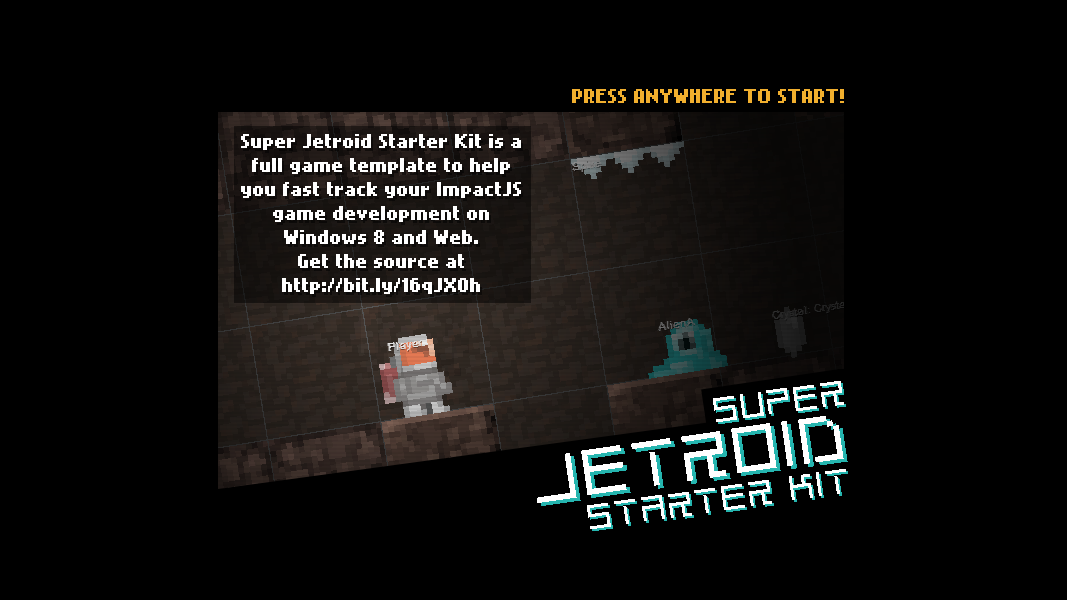
<style>
.page{position:relative;width:1067px;height:600px;background:#000000}
.page>*{position:absolute;margin:0}
.t1{font:16px "NokiaCellphoneFC-Small";color:#f1af2e}
.t2{font:16px/24px "NokiaCellphoneFC-Small";color:#ffffff}
.t3{font:38px "Radio Space Bitmap";color:#ffffff}
.t4{font:32px "NokiaCellphoneFC-Small";color:#ffffff}
.t5{font:72px "Radio Space Bitmap";color:#ffffff}
</style>
<div class="page">
<p class="t1" style="left:572px;top:89px;width:272px;height:14px">PRESS ANYWHERE TO START!</p>
<p class="t2" style="left:241px;top:134px;width:280px;height:160px;text-align:center">Super Jetroid Starter Kit is a full game template to help you fast track your ImpactJS game development on Windows 8 and Web.<br>Get the source at http://bit.ly/16qJX0h</p>
<p class="t3" style="left:713px;top:381px;width:131px;height:41px;rotate:-8deg"><span class="t4">   </span>SUPER</p>
<p class="t5" style="left:537px;top:416px;width:307px;height:87px;rotate:-8deg"><span class="t4">   <br></span>JETROID</p>
<p class="t3" style="left:587px;top:469px;width:259px;height:60px;rotate:-8deg"><span class="t4">   </span>STARTER KIT</p>
</div>
